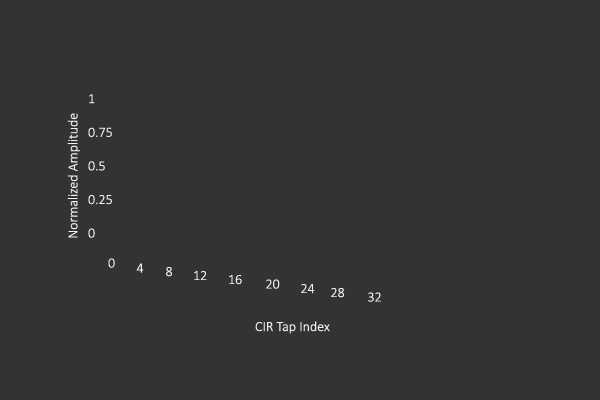
<style>
.page{position:relative;width:600px;height:400px;background:#333333}
.page>*{position:absolute;margin:0}
.t1{font:14px "Calibri-Light";color:#f2f2f2}
</style>
<div class="page">
<p class="t1" style="left:88px;top:94px;width:24px;height:144px">1<br><br>0.75<br><br>0.5<br><br>0.25<br><br>0</p>
<p class="t1" style="left:67px;top:113px;width:13px;height:125px;rotate:-90deg">Normalized Amplitude</p>
<p class="t1" style="left:108px;top:258px;width:7px;height:10px">0</p>
<p class="t1" style="left:136px;top:263px;width:8px;height:10px">4</p>
<p class="t1" style="left:166px;top:267px;width:6px;height:10px">8</p>
<p class="t1" style="left:194px;top:271px;width:13px;height:9px">12</p>
<p class="t1" style="left:229px;top:275px;width:13px;height:10px">16</p>
<p class="t1" style="left:266px;top:279px;width:14px;height:10px">20</p>
<p class="t1" style="left:301px;top:284px;width:14px;height:10px">24</p>
<p class="t1" style="left:331px;top:288px;width:14px;height:10px">28</p>
<p class="t1" style="left:368px;top:292px;width:13px;height:10px">32</p>
<p class="t1" style="left:255px;top:321px;width:75px;height:13px">CIR Tap Index</p>
</div>
